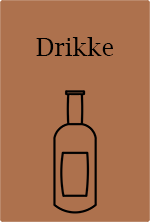
<style>
.page{position:relative;width:150px;height:222px;background:#ad714d}
.page>*{position:absolute;margin:0}
.t1{font:24px "LucidaBright";color:#000000}
.t2{font:36px "LucidaBright";color:#000000}
</style>
<div class="page">
<p class="t1" style="left:36px;top:37px;width:77px;height:19px"><span class="t2"><br></span>Drikke</p>
</div>
